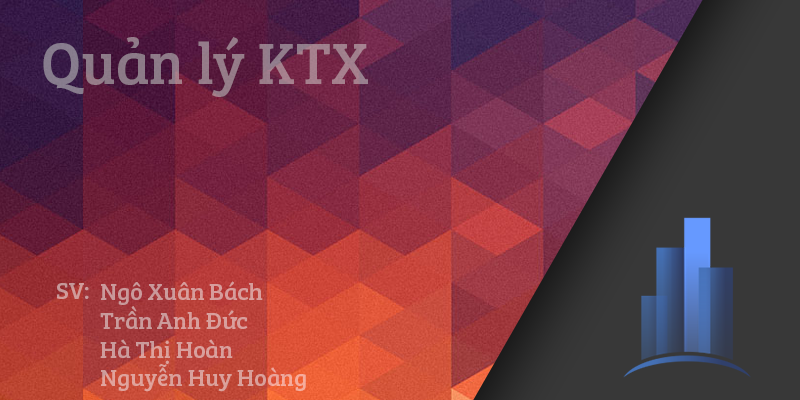
<style>
.page{position:relative;width:800px;height:400px}
.page>*{position:absolute;margin:0}
.t1{font:60px "BreeSerif";color:#937c8a}
.t2{font:24px "BreeSerif";color:#d89f9c}
.t3{font:24px "BreeSerif";color:#cc9a9a}
</style>
<div class="page">
<p class="t1" style="left:43px;top:37px;width:325px;height:60px">Quản lý KTX</p>
<p class="t2" style="left:100px;top:281px;width:206px;height:111px">Ngô Xuân Bách<br>Trần Anh Đức<br>Hà Thị Hoàn<br>Nguyễn Huy Hoàng</p>
<p class="t3" style="left:57px;top:283px;width:32px;height:16px">SV:</p>
</div>
